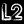
<style>
.page{position:relative;width:24px;height:24px;background:#000000}
.page>*{position:absolute;margin:0}
.t1{font:16.7px "BennyBlanco";color:#ffffff}
</style>
<div class="page">
<p class="t1" style="left:1px;top:3px;width:22px;height:18px">L2</p>
</div>
